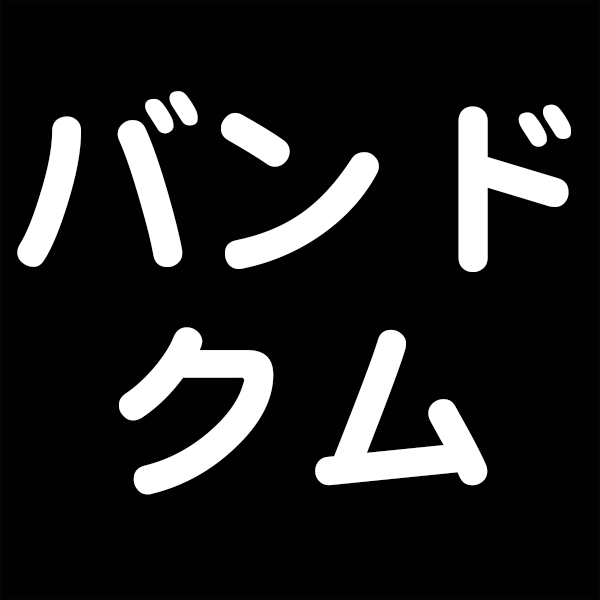
<style>
.page{position:relative;width:600px;height:600px;background:#010101}
.page>*{position:absolute;margin:0}
.t1{font:199.5px/73.7px "DFMaruGothic-SB-MP-RKSJ-H";color:#ffffff}
</style>
<div class="page">
<p class="t1" style="left:17px;top:91px;width:554px;height:404px;text-align:center">バンド<br><br><br>クム</p>
</div>
